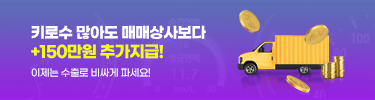
<style>
.page{position:relative;width:375px;height:100px}
.page>*{position:absolute;margin:0}
.t1{font:15.3px "GmarketSansTTFBold";letter-spacing:-0.05em;color:#ffffff}
.t2{font:16.1px "GmarketSansTTFBold";letter-spacing:-0.05em;color:#f6ff00}
.t3{font:10px "GmarketSansTTFMedium";letter-spacing:-0.05em;color:#ffffff}
</style>
<div class="page">
<p class="t1" style="left:31px;top:25px;width:175px;height:34px">키로수 많아도 매매상사보다 <br><span class="t2">+150만원 추가지급!</span></p>
<p class="t3" style="left:31px;top:68px;width:119px;height:9px">이제는 수출로 비싸게 파세요!</p>
</div>
